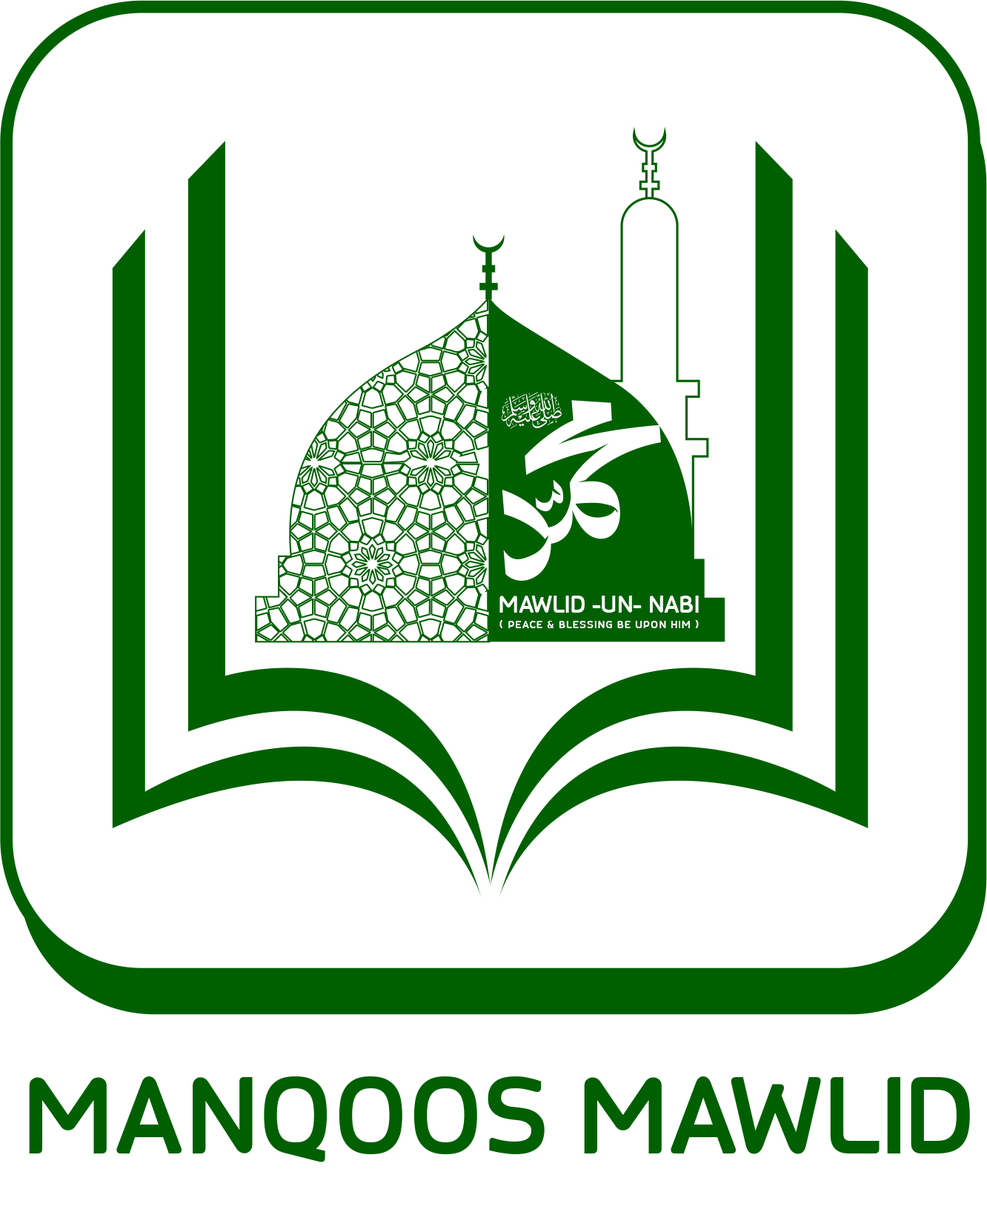
<style>
.page{position:relative;width:987px;height:1209px;background:#ffffff}
.page>*{position:absolute;margin:0}
.t1{font:24.9px "STC-Bold";color:#ffffff}
.t2{font:11.4px "STC-Bold";letter-spacing:0.075em;color:#ffffff}
.t3{font:12.4px "STC-Bold";letter-spacing:0.075em;color:#ffffff}
.t4{font:114.1px "STC-Bold";color:#006000}
</style>
<div class="page">
<p class="t1" style="left:499px;top:595px;width:199px;height:18px">MAWLID -UN- NABI</p>
<p class="t2" style="left:499px;top:620px;width:199px;height:8px"><span class="t3">( </span>PEACE &amp; BLESSING BE UPON HIM <span class="t3">)</span></p>
<p class="t4" style="left:29px;top:1076px;width:940px;height:86px">MANQOOS MAWLID</p>
</div>
